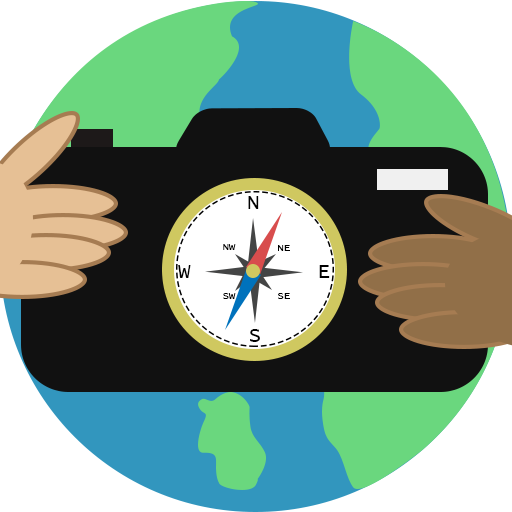
<style>
.page{position:relative;width:512px;height:512px;background:#ffffff}
.page>*{position:absolute;margin:0}
.t1{font:20.7px "LucidaConsole";color:#000000}
.t2{font:10.4px "LucidaConsole";color:#000000}
</style>
<div class="page">
<p class="t1" style="left:248px;top:196px;width:11px;height:13px">N</p>
<p class="t2" style="left:223px;top:244px;width:13px;height:6px">NW</p>
<p class="t2" style="left:278px;top:245px;width:12px;height:6px">NE</p>
<p class="t1" style="left:178px;top:265px;width:13px;height:13px">W</p>
<p class="t1" style="left:319px;top:265px;width:11px;height:13px">E</p>
<p class="t2" style="left:223px;top:293px;width:13px;height:6px">SW</p>
<p class="t2" style="left:278px;top:293px;width:12px;height:6px">SE</p>
<p class="t1" style="left:250px;top:329px;width:10px;height:13px">S</p>
</div>
